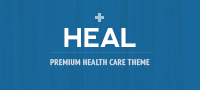
<style>
.page{position:relative;width:200px;height:90px}
.page>*{position:absolute;margin:0}
.t1{font:26px "nevis-Bold";color:#ffffff}
.t2{font:8px "PTSans-NarrowBold";letter-spacing:0.05em;color:#d4dee8}
</style>
<div class="page">
<p class="t1" style="left:64px;top:28px;width:17px;height:19px">H</p>
<p class="t1" style="left:84px;top:28px;width:15px;height:19px">E</p>
<p class="t1" style="left:100px;top:28px;width:20px;height:19px">A</p>
<p class="t1" style="left:121px;top:28px;width:15px;height:19px">L</p>
<p class="t2" style="left:50px;top:59px;width:100px;height:7px">PREMIUM HEALTH CARE THEME</p>
</div>
